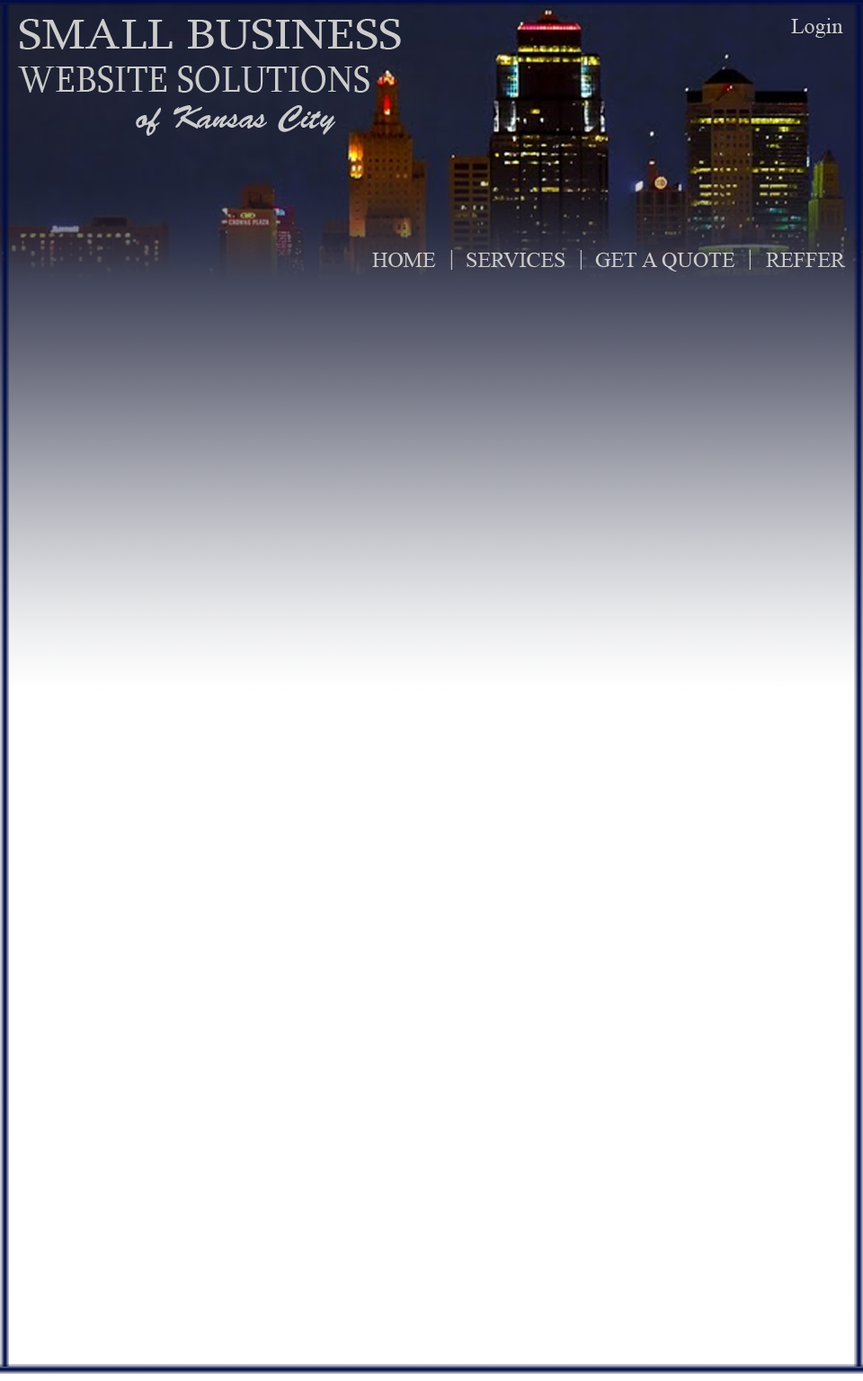
<style>
.page{position:relative;width:863px;height:1381px;background:#ffffff}
.page>*{position:absolute;margin:0}
.t1{font:21.6px "IskoolaPota";color:#cccccc}
.t2{font:43.2px "Sylfaen";color:#cccccc;scale:1.13 1}
.t3{font:37.8px "Sylfaen";color:#cccccc;scale:0.94 1}
.t4{font:32.4px "BrushScriptStd";color:#cccccc}
</style>
<div class="page">
<p class="t1" style="left:791px;top:18px;width:53px;height:20px">Login</p>
<p class="t2" style="left:20px;top:19px;width:381px;height:30px">SMALL BUSINESS</p>
<p class="t3" style="left:18px;top:66px;width:352px;height:27px">WEBSITE SOLUTIONS</p>
<p class="t4" style="left:136px;top:105px;width:199px;height:31px">of Kansas City</p>
<p class="t1" style="left:372px;top:253px;width:64px;height:14px">HOME</p>
<p class="t1" style="left:451px;top:250px;width:1px;height:20px">|</p>
<p class="t1" style="left:467px;top:253px;width:99px;height:14px">SERVICES</p>
<p class="t1" style="left:580px;top:250px;width:2px;height:20px">|</p>
<p class="t1" style="left:595px;top:253px;width:141px;height:19px">GET A QUOTE</p>
<p class="t1" style="left:749px;top:250px;width:2px;height:20px">|</p>
<p class="t1" style="left:766px;top:253px;width:80px;height:14px">REFFER</p>
</div>
